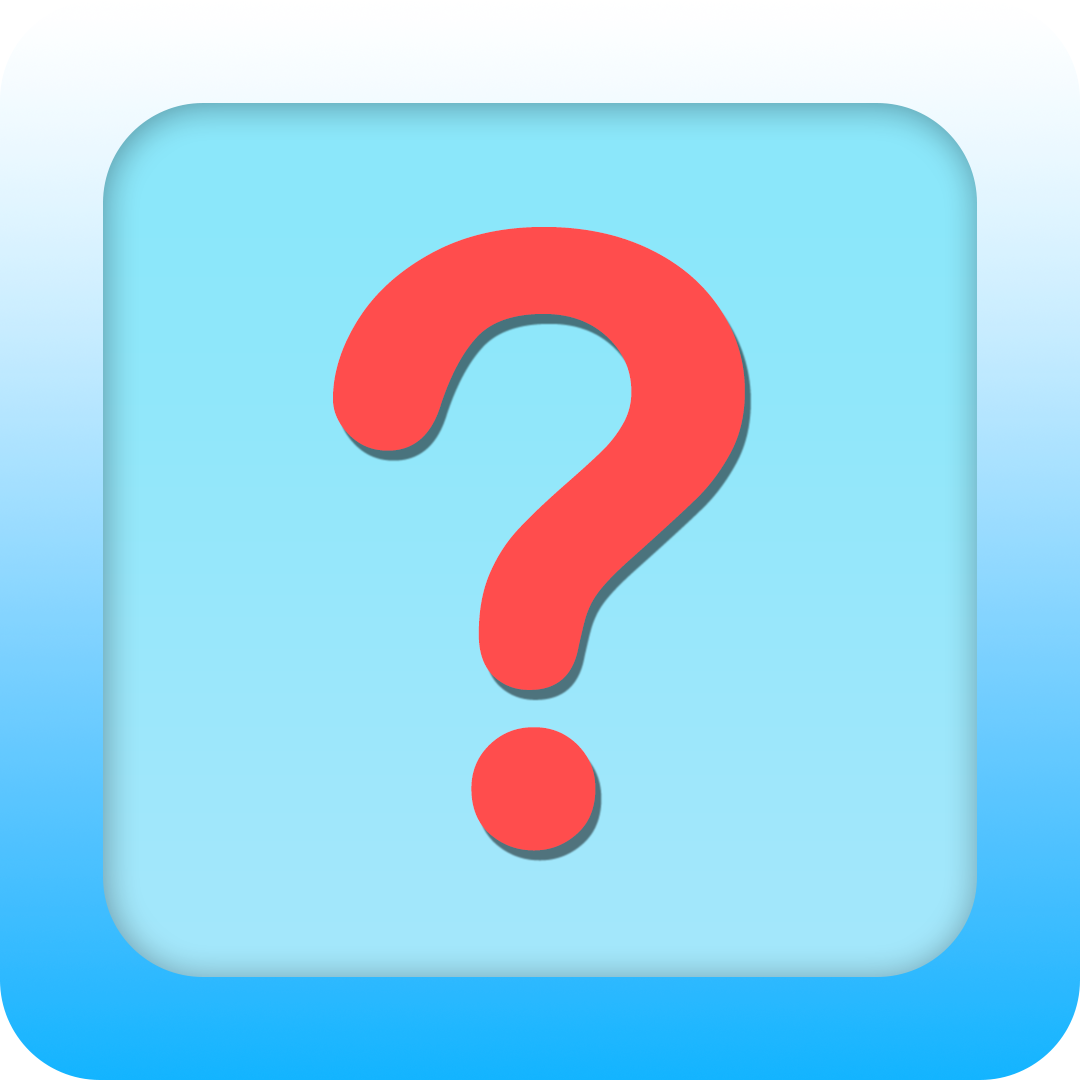
<style>
.page{position:relative;width:1080px;height:1080px}
.page>*{position:absolute;margin:0}
.t1{font:842.9px "ArialRoundedMTBold";color:#ff4d4d}
</style>
<div class="page">
<p class="t1" style="left:333px;top:227px;width:412px;height:624px">?</p>
</div>
